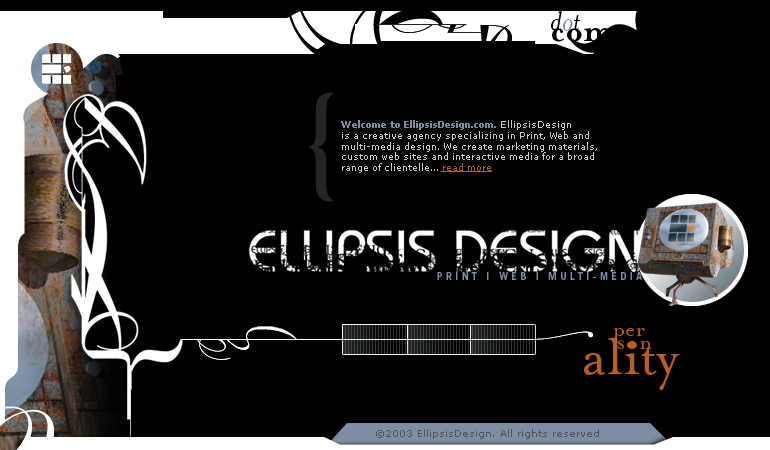
<style>
.page{position:relative;width:770px;height:450px;background:#000000}
.page>*{position:absolute;margin:0}
.t1{font:36px/11px "MrsEavesBold";color:#000000}
.t2{font:30px/24px "MrsEavesItalic";color:#000000}
.t3{font:30px/24px "MrsEavesItalic";color:#7d8ea2}
.t4{font:122.4px "Cochin";color:#252525}
.t5{font:9px "Verdana";color:#cbcbcb}
.t6{font:9px "Verdana-Bold";color:#7d8ea2}
.t7{font:9px "Verdana";color:#b75e22;text-decoration:underline}
.t8{font:11px "TradeGothic-Bold";letter-spacing:0.3em;color:#7d8ea2}
.t9{font:24px "MrsEavesRoman";color:#b75e22}
.t10{font:60px/25.7px "MrsEavesRoman";color:#b75e22}
.t11{font:24px/25.7px "MrsEavesRoman";letter-spacing:0.04em;color:#000000}
.t12{font:24px/25.7px "MrsEavesRoman";letter-spacing:0.04em;color:#b75e22}
.t13{font:10px "Verdana";color:#535353}
</style>
<div class="page">
<p class="t1" style="left:551px;top:11px;width:62px;height:31px"><span class="t2">d</span><span class="t3">o</span><span class="t2">t<br></span>com</p>
<p class="t4" style="left:308px;top:92px;width:25px;height:110px">{</p>
<p class="t5" style="left:341px;top:120px;width:256px;height:53px"><span class="t6">Welcome to EllipsisDesign.com. </span>EllipsisDesign<br>is a creative agency specializing in Print, Web and<br>multi-media design. We create marketing materials,<br>custom web sites and interactive media for a broad<br>range of clientelle... <span class="t7">read more</span></p>
<p class="t8" style="left:437px;top:272px;width:205px;height:8px">PRINT | WEB | MULTI-MEDIA</p>
<p class="t9" style="left:613px;top:328px;width:32px;height:14px">per</p>
<p class="t10" style="left:582px;top:337px;width:98px;height:54px"><span class="t11">per</span><span class="t12">son<br></span>ality</p>
<p class="t13" style="left:376px;top:429px;width:223px;height:10px">©2003 EllipsisDesign. All rights reserved</p>
</div>
